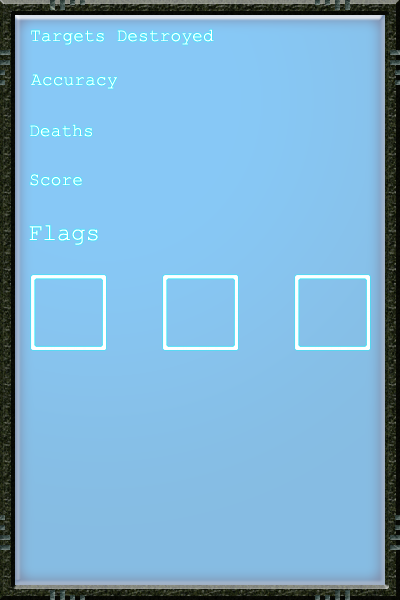
<style>
.page{position:relative;width:400px;height:600px}
.page>*{position:absolute;margin:0}
.t1{font:18px "CourierNewPSMT";color:#ffffff}
.t2{font:24px "CourierNewPSMT";color:#ffffff}
</style>
<div class="page">
<p class="t1" style="left:31px;top:29px;width:183px;height:16px">Targets Destroyed</p>
<p class="t1" style="left:31px;top:74px;width:86px;height:15px">Accuracy</p>
<p class="t1" style="left:30px;top:124px;width:62px;height:13px">Deaths</p>
<p class="t1" style="left:30px;top:174px;width:52px;height:12px">Score</p>
<p class="t2" style="left:29px;top:225px;width:69px;height:20px">Flags</p>
</div>
